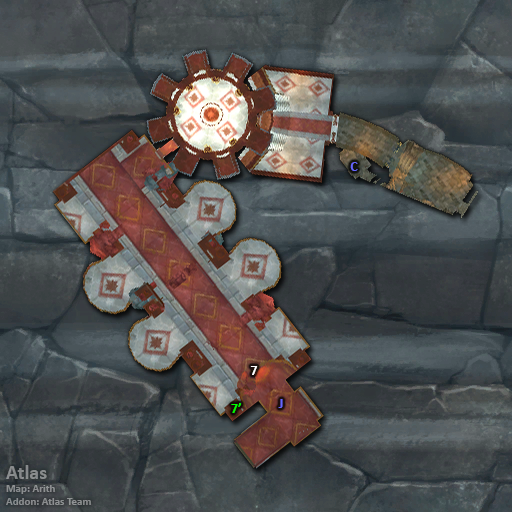
<style>
.page{position:relative;width:512px;height:512px}
.page>*{position:absolute;margin:0}
.t1{font:14px "Calibri-Bold";color:#6666ff}
.t2{font:14px "Calibri-Bold";color:#ffffff}
.t3{font:14px "Calibri-Bold";color:#00ff00}
.t4{font:11px "Calibri-Bold";color:#8a8d8f}
.t5{font:20px "Calibri-Bold";color:#8a8d8f}
</style>
<div class="page">
<p class="t1" style="left:350px;top:162px;width:8px;height:9px">C</p>
<p class="t2" style="left:250px;top:366px;width:8px;height:9px">7</p>
<p class="t1" style="left:278px;top:399px;width:5px;height:9px">J</p>
<p class="t3" style="left:231px;top:403px;width:10px;height:10px">7’</p>
<p class="t4" style="left:6px;top:465px;width:85px;height:40px"><span class="t5">Atlas<br></span>Map: Arith<br>Addon: Atlas Team</p>
</div>
